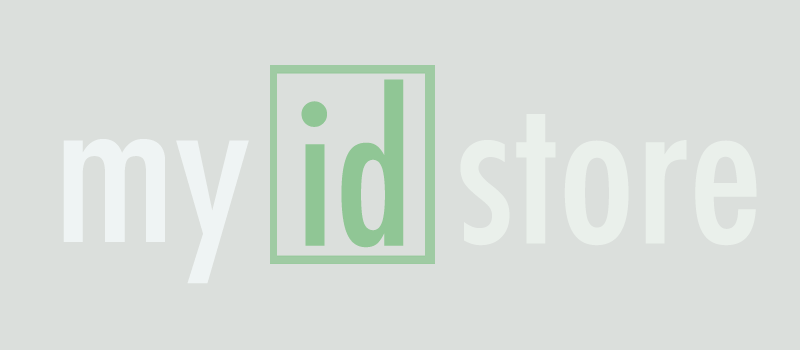
<style>
.page{position:relative;width:800px;height:350px;background:#dbdfdc}
.page>*{position:absolute;margin:0}
.t1{font:200px "Futura-CondensedMedium";color:#90c695}
.t2{font:200px "Futura-CondensedMedium";color:#eaf0eb}
.t3{font:200px "Futura-CondensedMedium";color:#eff4f4}
</style>
<div class="page">
<p class="t1" style="left:301px;top:79px;width:103px;height:169px">id</p>
<p class="t2" style="left:460px;top:114px;width:297px;height:132px">store</p>
<p class="t3" style="left:63px;top:139px;width:186px;height:145px">my</p>
</div>
